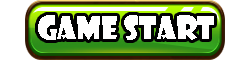
<style>
.page{position:relative;width:250px;height:60px;background:#ffffff}
.page>*{position:absolute;margin:0}
.t1{font:30px "ShowcardGothic-Reg";color:#ffffff}
</style>
<div class="page">
<p class="t1" style="left:38px;top:15px;width:176px;height:25px">Game Start</p>
</div>
